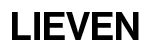
<style>
.page{position:relative;width:151px;height:52px;background:#ffffff}
.page>*{position:absolute;margin:0}
.t1{font:38.9px "NHaasGroteskDSPro-65Md";color:#000000}
</style>
<div class="page">
<p class="t1" style="left:12px;top:12px;width:127px;height:28px">LIEVEN</p>
</div>
